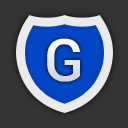
<style>
.page{position:relative;width:128px;height:128px;background:#333333}
.page>*{position:absolute;margin:0}
.t1{font:58.8px "Roboto-Medium";color:#e7e7e7}
</style>
<div class="page">
<p class="t1" style="left:47px;top:38px;width:33px;height:44px">G</p>
</div>
